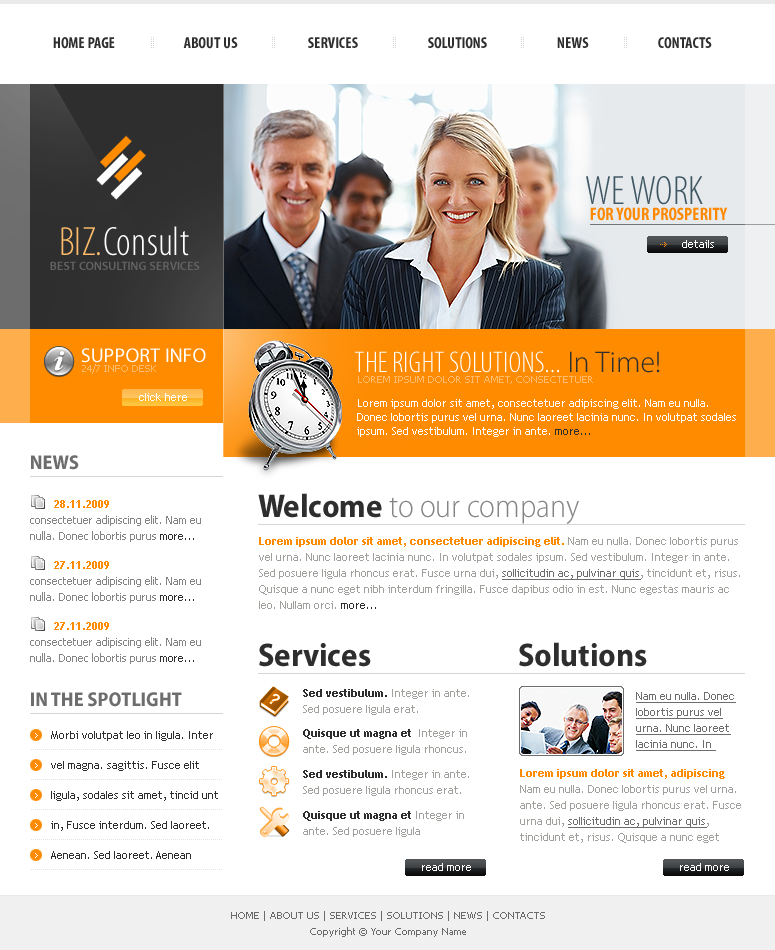
<style>
.page{position:relative;width:775px;height:950px;background:#ffffff}
.page>*{position:absolute;margin:0}
.t1{font:16px "MyriadPro-BoldCond";color:#2e2e2e}
.t2{font:41px "MyriadPro-LightCond";color:#3f5763;text-transform:uppercase}
.t3{font:18px "MyriadPro-BoldCond";color:#fe8900;text-transform:uppercase}
.t4{font:41px "MyriadPro-LightCond";color:#ffffff}
.t5{font:41px "MyriadPro-LightCond";color:#febb6a}
.t6{font:11px "TrebuchetMS";color:#ffffff}
.t7{font:12px "MyriadPro-Semibold";color:#646464;text-transform:uppercase}
.t8{font:20px "MyriadPro-Regular";color:#ffffff;text-transform:uppercase}
.t9{font:30px "MyriadPro-LightCond";color:#ffffff;text-transform:uppercase}
.t10{font:30px "MyriadPro-Light";color:#2e2e2e}
.t11{font:10px "Tahoma";color:#febb6a;text-transform:uppercase}
.t12{font:11px/14px "TrebuchetMS";color:#ffffff}
.t13{font:11px/14px "TrebuchetMS";color:#2e2e2e}
.t14{font:20px "MyriadPro-BoldSemiCn";color:#6d6d6d}
.t15{font:33px "MyriadPro-LightSemiCn";color:#848484}
.t16{font:33px "MyriadPro-BoldSemiCn";color:#2e2e2e}
.t17{font:11px/16px "Tahoma";color:#848484}
.t18{font:11px/16px "TrebuchetMS-Bold";color:#fe8b00}
.t19{font:11px/16px "Tahoma";color:#2e2e2e}
.t20{font:11px/16px "TrebuchetMS";color:#a0a09c}
.t21{font:11px/16px "TrebuchetMS";color:#6d6d6d;text-decoration:underline}
.t22{font:11px/16px "TrebuchetMS";color:#2e2e2e}
.t23{font:11px/16px "TrebuchetMS-Bold";color:#2e2e2e}
.t24{font:11px/30px "TrebuchetMS";color:#2e2e2e}
.t25{font:10px/16px "Tahoma";color:#6a6a6a}
</style>
<div class="page">
<p class="t1" style="left:53px;top:37px;width:62px;height:12px">HOME PAGE</p>
<p class="t1" style="left:183px;top:37px;width:55px;height:12px">ABOUT US</p>
<p class="t1" style="left:308px;top:37px;width:50px;height:11px">SERVICES</p>
<p class="t1" style="left:428px;top:37px;width:59px;height:12px">SOLUTIONS</p>
<p class="t1" style="left:557px;top:37px;width:32px;height:11px">NEWS</p>
<p class="t1" style="left:658px;top:37px;width:54px;height:12px">CONTACTS</p>
<p class="t2" style="left:586px;top:176px;width:117px;height:29px">We work</p>
<p class="t3" style="left:590px;top:207px;width:138px;height:14px">for your prosperity</p>
<p class="t4" style="left:61px;top:226px;width:128px;height:30px"><span class="t5">BIZ.</span>Consult</p>
<p class="t6" style="left:682px;top:240px;width:32px;height:8px">details</p>
<p class="t7" style="left:50px;top:261px;width:150px;height:9px">BEST CONSULTING SERVICES</p>
<p class="t8" style="left:81px;top:348px;width:125px;height:15px">support Info</p>
<p class="t9" style="left:355px;top:351px;width:305px;height:22px">The Right Solutions... <span class="t10">In Time!</span></p>
<p class="t11" style="left:82px;top:364px;width:74px;height:10px">24/7 INFO DESK</p>
<p class="t11" style="left:358px;top:376px;width:235px;height:8px">LOREM IPSUM DOLOR SIT AMET, CONSECTETUER</p>
<p class="t6" style="left:139px;top:393px;width:48px;height:8px">click here</p>
<p class="t12" style="left:357px;top:399px;width:379px;height:38px">Lorem ipsum dolor sit amet, consectetuer adipiscing elit. Nam eu nulla. Donec lobortis purus vel urna. Nunc laoreet lacinia nunc. In volutpat sodales ipsum. Sed vestibulum. Integer in ante. <span class="t13">more...</span></p>
<p class="t14" style="left:31px;top:455px;width:48px;height:15px">NEWS</p>
<p class="t15" style="left:258px;top:493px;width:321px;height:31px"><span class="t16">Welcome </span>to our company</p>
<p class="t17" style="left:30px;top:500px;width:171px;height:42px"><span class="t18">        28.11.2009<br></span>consectetuer adipiscing elit. Nam eu nulla. Donec lobortis purus <span class="t19">more...</span></p>
<p class="t20" style="left:259px;top:537px;width:481px;height:72px"><span class="t18">Lorem ipsum dolor sit amet, consectetuer adipiscing elit.</span> Nam eu nulla. Donec lobortis purus vel urna. Nunc laoreet lacinia nunc. In volutpat sodales ipsum. Sed vestibulum. Integer in ante. Sed posuere ligula rhoncus erat. Fusce urna dui, <span class="t21">sollicitudin ac, pulvinar quis</span>, tincidunt et, risus. Quisque a nunc eget nibh interdum fringilla. Fusce dapibus odio in est. Nunc egestas mauris ac leo. Nullam orci. <span class="t22">more...</span></p>
<p class="t17" style="left:30px;top:561px;width:171px;height:42px"><span class="t18">        27.11.2009<br></span>consectetuer adipiscing elit. Nam eu nulla. Donec lobortis purus <span class="t19">more...</span></p>
<p class="t17" style="left:30px;top:622px;width:171px;height:42px"><span class="t18">        27.11.2009<br></span>consectetuer adipiscing elit. Nam eu nulla. Donec lobortis purus <span class="t19">more...</span></p>
<p class="t16" style="left:259px;top:643px;width:112px;height:24px">Services</p>
<p class="t16" style="left:519px;top:642px;width:128px;height:25px">Solutions</p>
<p class="t20" style="left:303px;top:689px;width:166px;height:26px"><span class="t23">Sed vestibulum.</span> Integer in ante. Sed posuere ligula erat.</p>
<p class="t14" style="left:31px;top:692px;width:151px;height:15px">IN THE SPOTLIGHT</p>
<p class="t21" style="left:636px;top:692px;width:100px;height:59px">Nam eu nulla. Donec lobortis purus vel urna. Nunc laoreet lacinia nunc. In</p>
<p class="t24" style="left:51px;top:731px;width:167px;height:128px">Morbi volutpat leo in ligula. Inter vel magna. sagittis. Fusce elit ligula, sodales sit amet, tincid unt in, Fusce interdum. Sed laoreet. Aenean. Sed laoreet. Aenean</p>
<p class="t20" style="left:303px;top:729px;width:164px;height:26px"><span class="t23">Quisque ut magna et </span> Integer in ante. Sed posuere ligula rhoncus.</p>
<p class="t20" style="left:303px;top:770px;width:166px;height:26px"><span class="t23">Sed vestibulum.</span> Integer in ante. Sed posuere ligula rhoncus erat.</p>
<p class="t20" style="left:520px;top:769px;width:221px;height:74px"><span class="t18">Lorem ipsum dolor sit amet, adipiscing </span>Nam eu nulla. Donec lobortis purus vel urna. ante. Sed posuere ligula rhoncus erat. Fusce urna dui, <span class="t21">sollicitudin ac, pulvinar quis</span>, tincidunt et, risus. Quisque a nunc eget</p>
<p class="t20" style="left:303px;top:811px;width:161px;height:26px"><span class="t23">Quisque ut magna et </span>Integer in ante. Sed posuere ligula</p>
<p class="t6" style="left:422px;top:863px;width:49px;height:8px">read more</p>
<p class="t6" style="left:680px;top:863px;width:49px;height:8px">read more</p>
<p class="t25" style="left:231px;top:911px;width:314px;height:26px;text-align:center">HOME | ABOUT US | SERVICES | SOLUTIONS | NEWS | CONTACTS<br>Copyright © Your Company Name</p>
</div>
